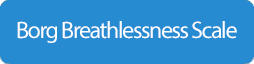
<style>
.page{position:relative;width:254px;height:64px;background:#278bd2}
.page>*{position:absolute;margin:0}
.t1{font:24px "MyriadPro-Regular";letter-spacing:-0.06em;color:#feffff}
</style>
<div class="page">
<p class="t1" style="left:17px;top:21px;width:220px;height:22px">Borg Breathlessness Scale</p>
</div>
